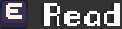
<style>
.page{position:relative;width:122px;height:29px;background:#333333}
.page>*{position:absolute;margin:0}
.t1{font:30px "ManaspaceReg";color:#ffffff}
</style>
<div class="page">
<p class="t1" style="left:44px;top:3px;width:76px;height:23px">Read</p>
</div>
